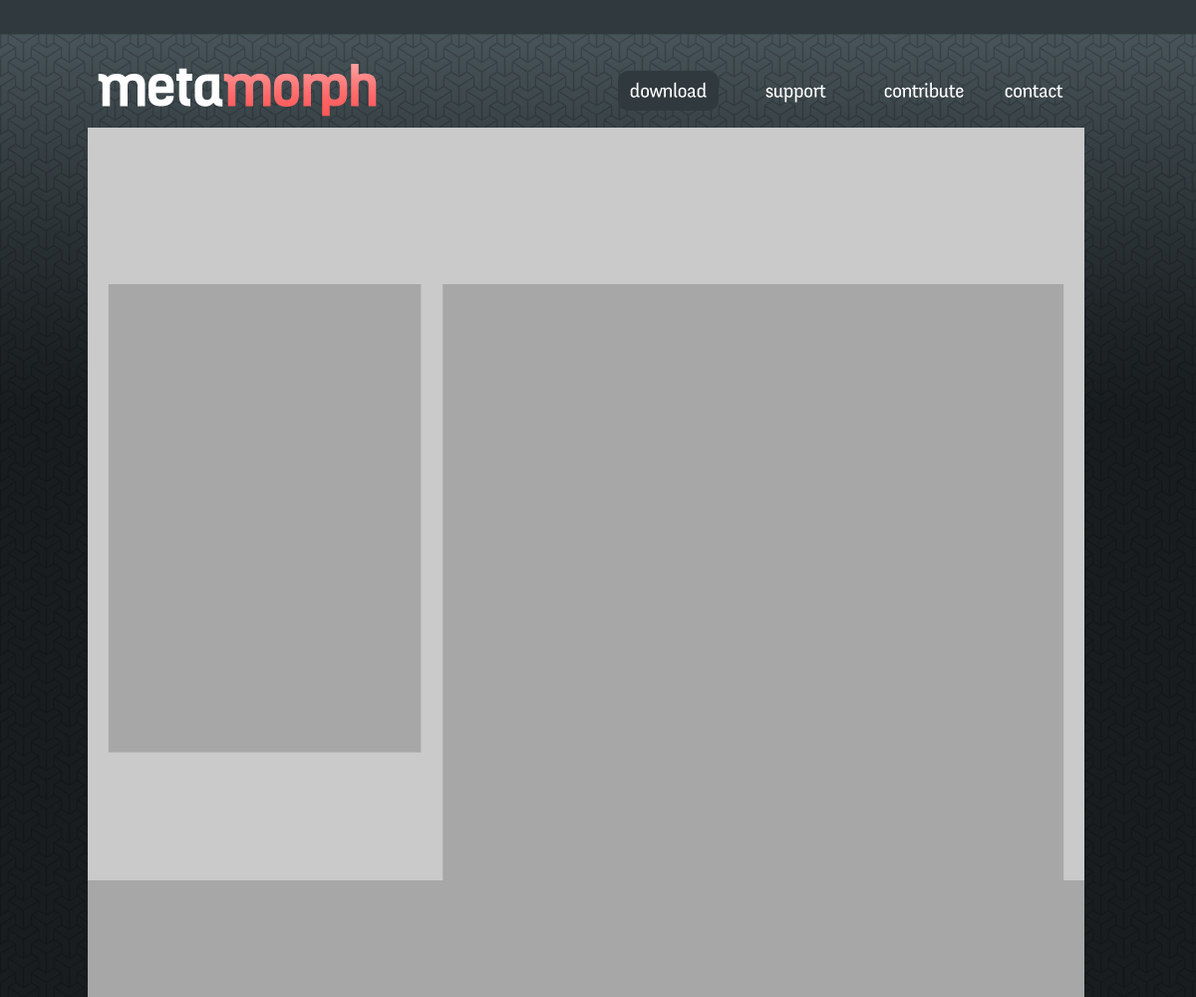
<style>
.page{position:relative;width:1196px;height:997px;background:#a7a7a7}
.page>*{position:absolute;margin:0}
.t1{font:54.8px "Kelson-Bold";letter-spacing:-0.025em;color:#ff5858}
.t2{font:54.8px "Kelson-Bold";letter-spacing:-0.025em;color:#ffffff}
.t3{font:19.9px "FengardoNeue";letter-spacing:-0.025em;color:#ffffff}
</style>
<div class="page">
<p class="t1" style="left:98px;top:64px;width:279px;height:53px"><span class="t2">meta</span>morph</p>
<p class="t3" style="left:630px;top:82px;width:77px;height:16px">download</p>
<p class="t3" style="left:766px;top:85px;width:60px;height:18px">support</p>
<p class="t3" style="left:884px;top:82px;width:80px;height:16px">contribute</p>
<p class="t3" style="left:1005px;top:85px;width:59px;height:13px">contact</p>
</div>
